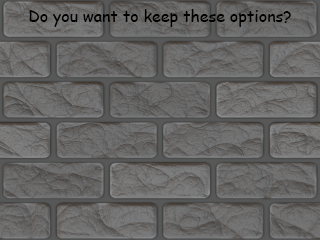
<style>
.page{position:relative;width:320px;height:240px}
.page>*{position:absolute;margin:0}
.t1{font:16px "ComicSansMS";color:#000000}
</style>
<div class="page">
<p class="t1" style="left:29px;top:9px;width:262px;height:18px">Do you want to keep these options?</p>
</div>
